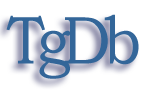
<style>
.page{position:relative;width:147px;height:91px;background:#ffffff}
.page>*{position:absolute;margin:0}
.t1{font:68px "BookmanOldStyle";letter-spacing:-0.13em;color:#336699;scale:0.9 1}
</style>
<div class="page">
<p class="t1" style="left:6px;top:14px;width:133px;height:65px">TgDb</p>
</div>
